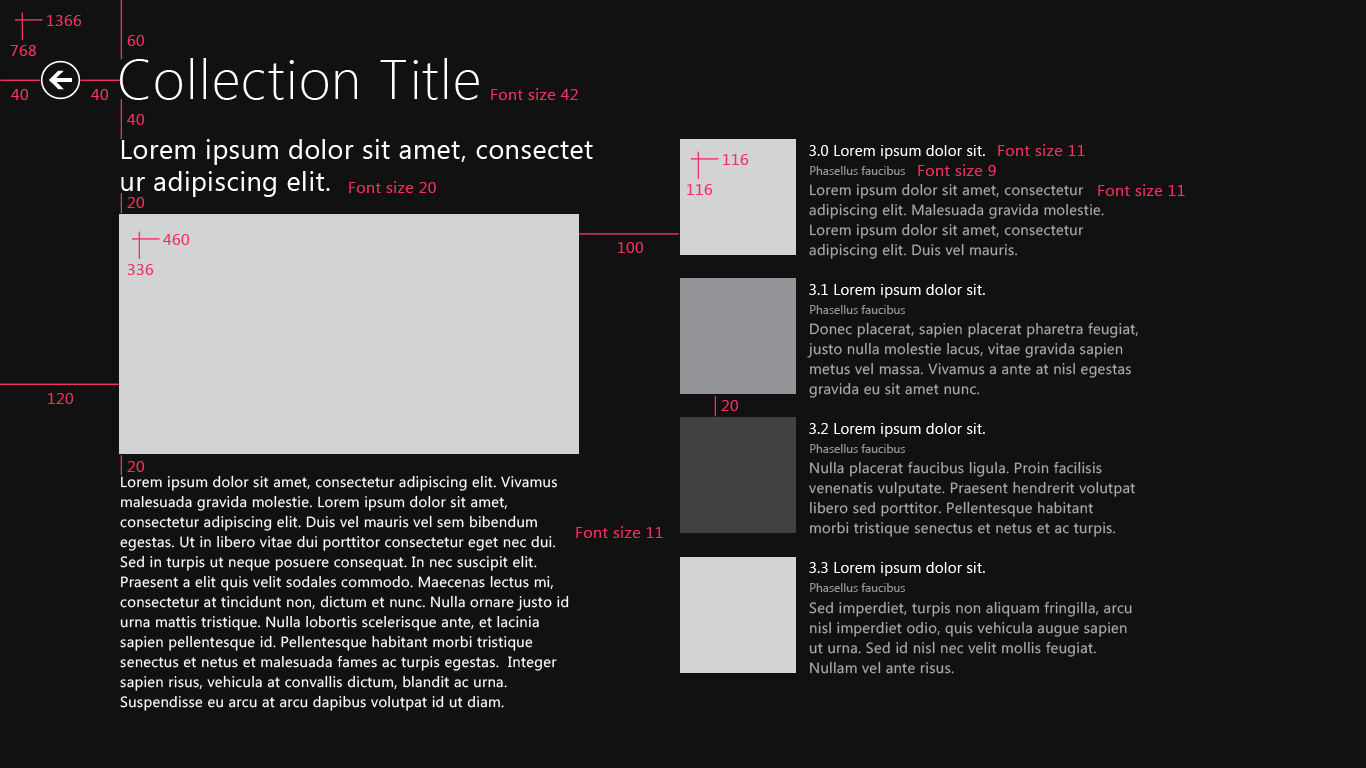
<style>
.page{position:relative;width:1366px;height:768px;background:#111111}
.page>*{position:absolute;margin:0}
.t1{font:16px "SegoeUI";letter-spacing:0.025em;color:#f2315f}
.t2{font:56px "SegoeUI-Light";letter-spacing:0.025em;color:#ffffff}
.t3{font:26.7px/32px "SegoeUI";letter-spacing:0.025em;color:#ffffff}
.t4{font:14.7px "SegoeUI";letter-spacing:0.025em;color:#ffffff}
.t5{font:12px "SegoeUI";color:#939598}
.t6{font:14.7px/20px "SegoeUI";letter-spacing:0.025em;color:#a9a9a9}
.t7{font:14.7px/20px "SegoeUI";letter-spacing:0.025em;color:#ffffff}
</style>
<div class="page">
<p class="t1" style="left:47px;top:15px;width:35px;height:11px">1366</p>
<p class="t1" style="left:127px;top:35px;width:18px;height:11px">60</p>
<p class="t1" style="left:10px;top:45px;width:26px;height:11px">768</p>
<p class="t2" style="left:120px;top:58px;width:359px;height:42px">Collection Title</p>
<p class="t1" style="left:11px;top:89px;width:18px;height:11px">40</p>
<p class="t1" style="left:91px;top:89px;width:18px;height:11px">40</p>
<p class="t1" style="left:491px;top:88px;width:87px;height:12px">Font size 42</p>
<p class="t1" style="left:127px;top:114px;width:18px;height:11px">40</p>
<p class="t3" style="left:121px;top:139px;width:472px;height:58px">Lorem ipsum dolor sit amet, consectet <br>ur adipiscing elit.</p>
<p class="t4" style="left:809px;top:145px;width:176px;height:14px">3.0 Lorem ipsum dolor sit.</p>
<p class="t1" style="left:998px;top:144px;width:87px;height:12px">Font size 11</p>
<p class="t1" style="left:723px;top:154px;width:26px;height:11px">116</p>
<p class="t5" style="left:810px;top:166px;width:95px;height:9px">Phasellus faucibus</p>
<p class="t1" style="left:918px;top:164px;width:78px;height:12px">Font size 9</p>
<p class="t1" style="left:349px;top:181px;width:87px;height:12px">Font size 20</p>
<p class="t1" style="left:687px;top:184px;width:26px;height:11px">116</p>
<p class="t6" style="left:809px;top:183px;width:295px;height:76px">Lorem ipsum dolor sit amet, consectetur <br>adipiscing elit. Malesuada gravida molestie. Lorem ipsum dolor sit amet, consectetur <br>adipiscing elit. Duis vel mauris.</p>
<p class="t1" style="left:1098px;top:184px;width:87px;height:12px">Font size 11</p>
<p class="t1" style="left:127px;top:197px;width:18px;height:11px">20</p>
<p class="t1" style="left:163px;top:234px;width:27px;height:11px">460</p>
<p class="t1" style="left:618px;top:242px;width:26px;height:11px">100</p>
<p class="t1" style="left:127px;top:264px;width:27px;height:11px">336</p>
<p class="t4" style="left:809px;top:284px;width:176px;height:14px">3.1 Lorem ipsum dolor sit.</p>
<p class="t5" style="left:810px;top:305px;width:95px;height:9px">Phasellus faucibus</p>
<p class="t6" style="left:807px;top:322px;width:331px;height:76px">Donec placerat, sapien placerat pharetra feugiat, justo nulla molestie lacus, vitae gravida sapien metus vel massa. Vivamus a ante at nisl egestas gravida eu sit amet nunc.</p>
<p class="t1" style="left:48px;top:393px;width:26px;height:11px">120</p>
<p class="t1" style="left:721px;top:400px;width:18px;height:11px">20</p>
<p class="t4" style="left:809px;top:423px;width:176px;height:14px">3.2 Lorem ipsum dolor sit.</p>
<p class="t5" style="left:810px;top:444px;width:95px;height:9px">Phasellus faucibus</p>
<p class="t1" style="left:127px;top:461px;width:18px;height:11px">20</p>
<p class="t6" style="left:809px;top:461px;width:326px;height:76px">Nulla placerat faucibus ligula. Proin facilisis <br>venenatis vulputate. Praesent hendrerit volutpat libero sed porttitor. Pellentesque habitant <br>morbi tristique senectus et netus et ac turpis.</p>
<p class="t7" style="left:120px;top:475px;width:449px;height:236px">Lorem ipsum dolor sit amet, consectetur adipiscing elit. Vivamus malesuada gravida molestie. Lorem ipsum dolor sit amet, <br>consectetur adipiscing elit. Duis vel mauris vel sem bibendum egestas. Ut in libero vitae dui porttitor consectetur eget nec dui. Sed in turpis ut neque posuere consequat. In nec suscipit elit. <br>Praesent a elit quis velit sodales commodo. Maecenas lectus mi, consectetur at tincidunt non, dictum et nunc. Nulla ornare justo id urna mattis tristique. Nulla lobortis scelerisque ante, et lacinia sapien pellentesque id. Pellentesque habitant morbi tristique <br>senectus et netus et malesuada fames ac turpis egestas.  Integer sapien risus, vehicula at convallis dictum, blandit ac urna. <br>Suspendisse eu arcu at arcu dapibus volutpat id ut diam.</p>
<p class="t1" style="left:576px;top:526px;width:87px;height:12px">Font size 11</p>
<p class="t4" style="left:809px;top:562px;width:176px;height:14px">3.3 Lorem ipsum dolor sit.</p>
<p class="t5" style="left:810px;top:583px;width:95px;height:9px">Phasellus faucibus</p>
<p class="t6" style="left:809px;top:601px;width:323px;height:73px">Sed imperdiet, turpis non aliquam fringilla, arcu nisl imperdiet odio, quis vehicula augue sapien ut urna. Sed id nisl nec velit mollis feugiat. Nullam vel ante risus.</p>
</div>
